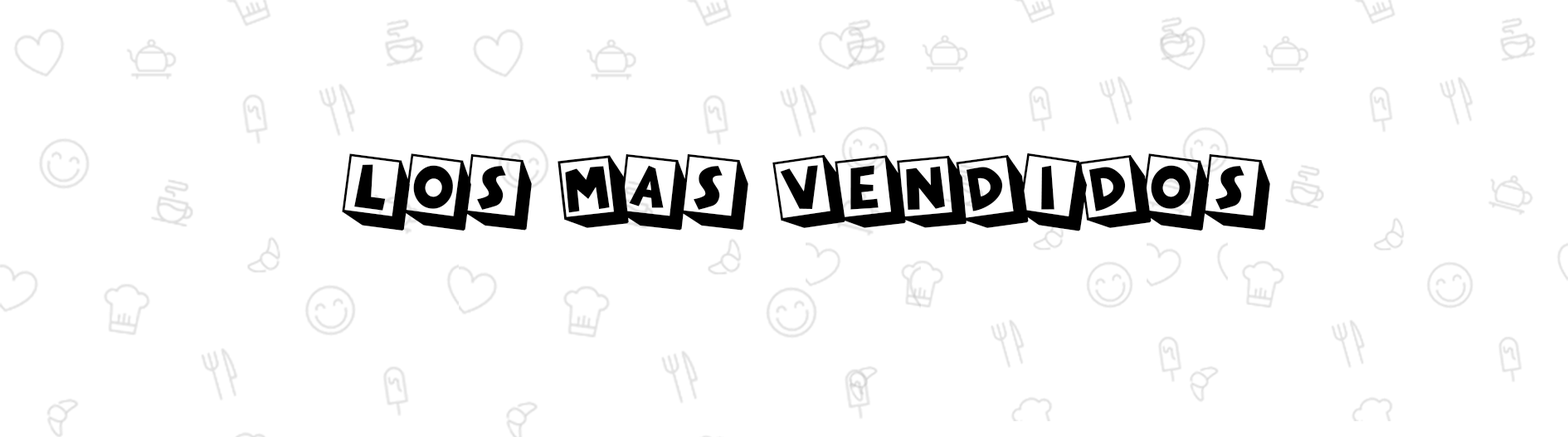
<style>
.page{position:relative;width:1568px;height:437px;background:#ffffff}
.page>*{position:absolute;margin:0}
.t1{font:103.7px "LOVE-YOU";color:#000000}
</style>
<div class="page">
<p class="t1" style="left:342px;top:153px;width:928px;height:78px">LOS MAS VENDIDOS</p>
</div>
